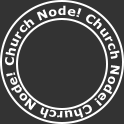
<style>
.page{position:relative;width:124px;height:124px;background:#333333}
.page>*{position:absolute;margin:0}
.t1{font:12px "Verdana-Bold";color:#ffffff;scale:1.07 1}
</style>
<div class="page">
<p class="t1" style="left:5px;top:5px;width:115px;height:113px;text-align:center">Church Node! Church Node! Church Node!</p>
</div>
